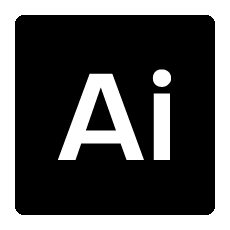
<style>
.page{position:relative;width:230px;height:230px;background:#000000}
.page>*{position:absolute;margin:0}
.t1{font:120px "BlueHighway-Regular";color:#ffffff;scale:1.25 1}
</style>
<div class="page">
<p class="t1" style="left:58px;top:69px;width:113px;height:91px">Ai</p>
</div>
